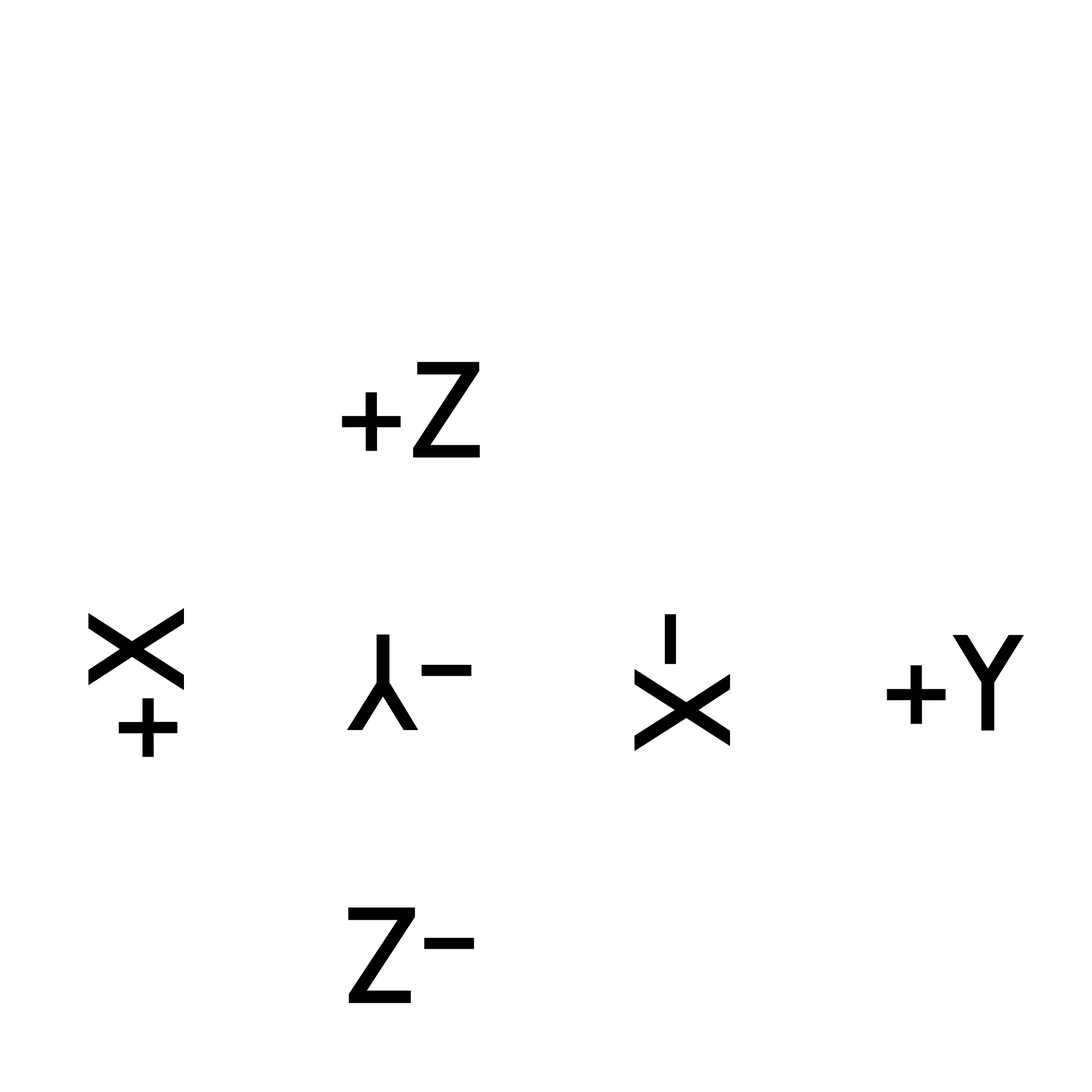
<style>
.page{position:relative;width:1092px;height:1092px;background:#ffffff}
.page>*{position:absolute;margin:0}
.t1{font:136.5px "Tilde-Regular";color:#000000}
</style>
<div class="page">
<p class="t1" style="left:342px;top:362px;width:138px;height:95px">+Z</p>
<p class="t1" style="left:88px;top:608px;width:96px;height:149px;rotate:-90deg">+X</p>
<p class="t1" style="left:635px;top:614px;width:95px;height:137px;rotate:90deg">-X</p>
<p class="t1" style="left:347px;top:635px;width:125px;height:95px;rotate:180deg">-Y</p>
<p class="t1" style="left:887px;top:635px;width:137px;height:95px">+Y</p>
<p class="t1" style="left:348px;top:907px;width:127px;height:96px;rotate:180deg">-Z</p>
</div>
